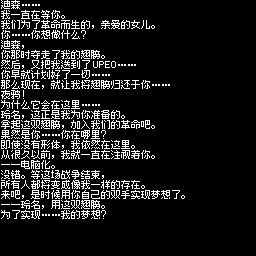
<style>
.page{position:relative;width:256px;height:256px;background:#000000}
.page>*{position:absolute;margin:0}
.t1{font:10px/10px "Fusion-Pixel-10px-Proportional-zh_hans-Regular";color:#ffffff}
</style>
<div class="page">
<p class="t1" style="left:1px;top:0px;width:184px;height:219px">迪森……<br>我一直在等你。<br>我们为了革命而生的，亲爱的女儿。<br>你……你想做什么？<br>迪森，<br>你那时夺走了我的翅膀。<br>然后，又把我送到了UPEO……<br>你早就计划好了一切……<br>那么现在，就让我将翅膀归还于你……<br>夜鸦！<br>为什么它会在这里……<br>玲名，这正是我为你准备的。<br>拿起这双翅膀，加入我们的革命吧。<br>果然是你……你在哪里？<br>即使没有形体，我依然在这里。<br>从很久以前，我就一直在注视着你。<br>——电脑化。<br>没错。等这场战争结束，<br>所有人都将变成像我一样的存在。<br>来吧，是时候用你自己的双手实现梦想了。<br>——玲名，用这双翅膀。<br>为了实现……我的梦想？</p>
</div>
